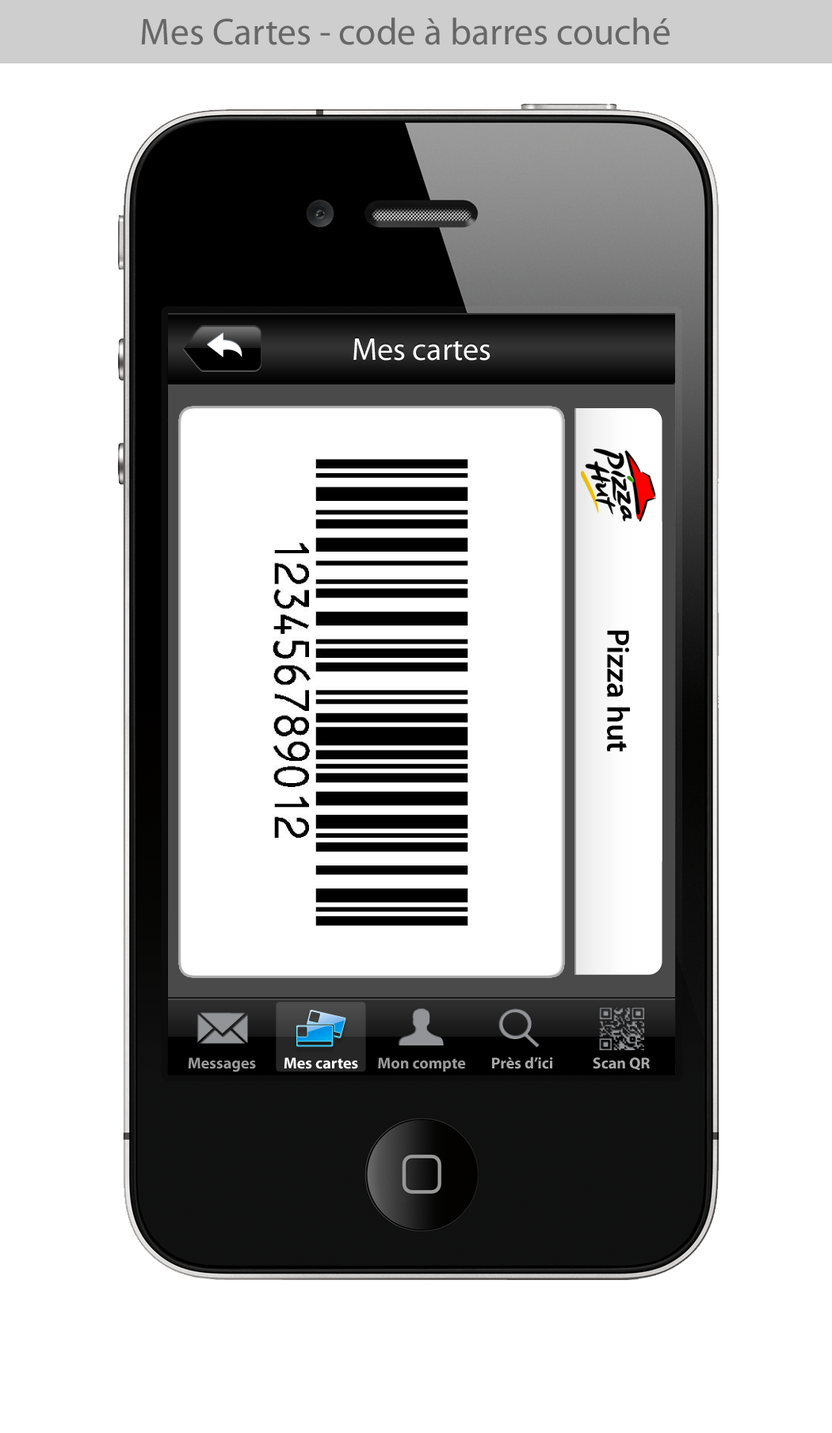
<style>
.page{position:relative;width:832px;height:1433px;background:#ffffff}
.page>*{position:absolute;margin:0}
.t1{font:37.7px "MyriadPro-Regular";color:#676767}
.t2{font:31.7px "MyriadPro-Regular";color:#ffffff}
.t3{font:31.7px "MyriadPro-Semibold";color:#000000}
.t4{font:15.9px "MyriadPro-Bold";color:#999999}
.t5{font:15.9px "MyriadPro-Bold";color:#ffffff}
.t6{font:15.9px "MyriadPro-Bold";color:#a8a8a8}
</style>
<div class="page">
<p class="t1" style="left:141px;top:17px;width:529px;height:28px">Mes Cartes - code à barres couché</p>
<p class="t2" style="left:353px;top:338px;width:138px;height:23px">Mes cartes</p>
<p class="t3" style="left:607px;top:630px;width:23px;height:121px;rotate:90deg">Pizza hut</p>
<p class="t4" style="left:188px;top:1057px;width:68px;height:15px">Messages</p>
<p class="t5" style="left:284px;top:1057px;width:74px;height:12px">Mes cartes</p>
<p class="t4" style="left:378px;top:1057px;width:88px;height:15px">Mon compte</p>
<p class="t6" style="left:492px;top:1056px;width:61px;height:13px">Près d’ici</p>
<p class="t6" style="left:593px;top:1057px;width:57px;height:14px">Scan QR</p>
</div>
